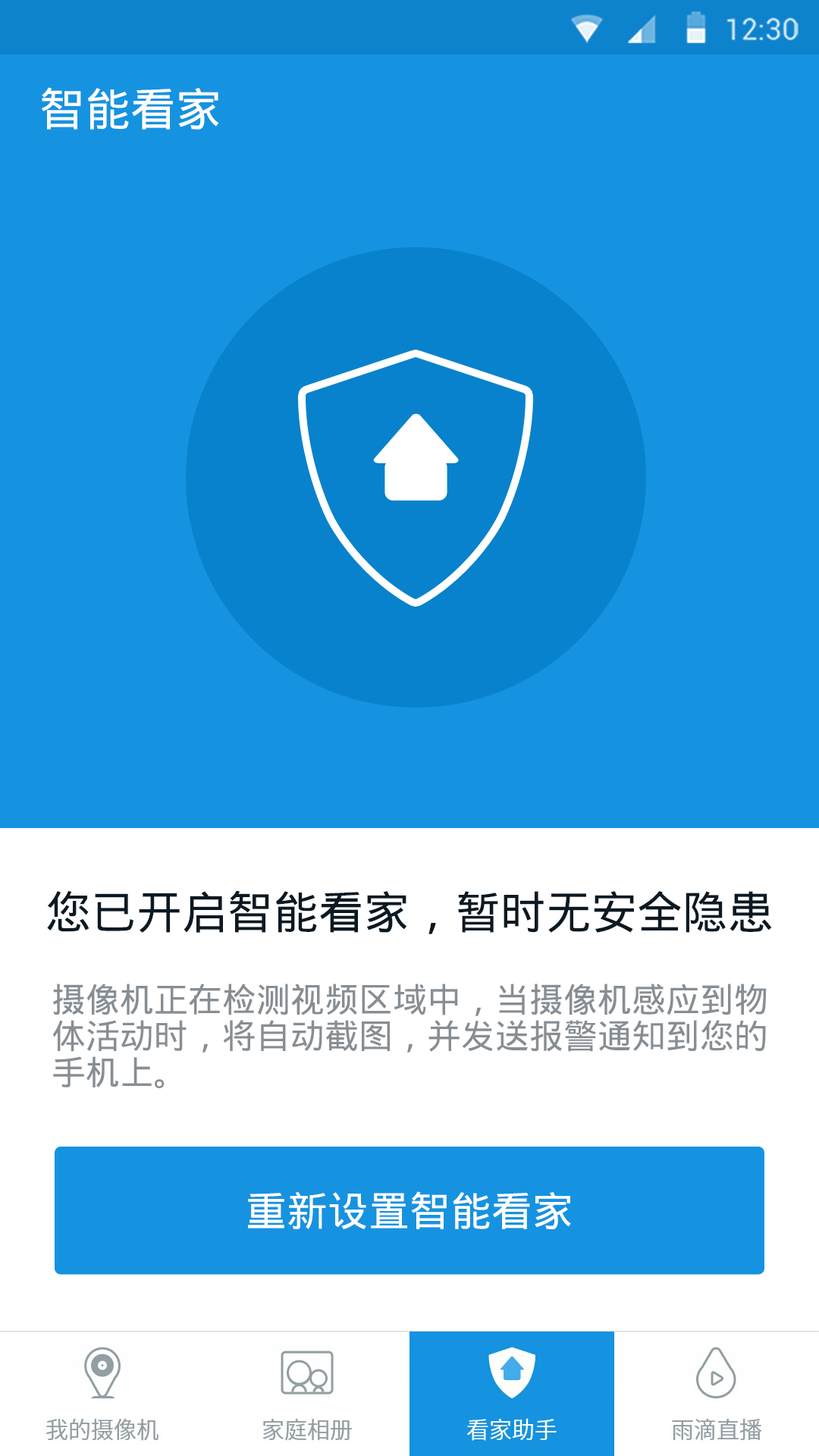
<style>
.page{position:relative;width:819px;height:1456px;background:#1593e0}
.page>*{position:absolute;margin:0}
.t1{font:45.5px "DroidSansFallback";color:#ffffff}
.t2{font:45.5px "DroidSansFallback";color:#0b1922}
.t3{font:34.1px/36.4px "DroidSansFallback";color:#878e93}
.t4{font:40.9px "DroidSansFallback";color:#ffffff}
</style>
<div class="page">
<p class="t1" style="left:42px;top:87px;width:177px;height:43px">智能看家</p>
<p class="t2" style="left:47px;top:890px;width:725px;height:44px">您已开启智能看家，暂时无安全隐患</p>
<p class="t3" style="left:52px;top:984px;width:715px;height:104px">摄像机正在检测视频区域中，当摄像机感应到物<br>体活动时，将自动截图，并发送报警通知到您的<br>手机上。</p>
<p class="t4" style="left:248px;top:1191px;width:323px;height:38px">重新设置智能看家</p>
</div>
